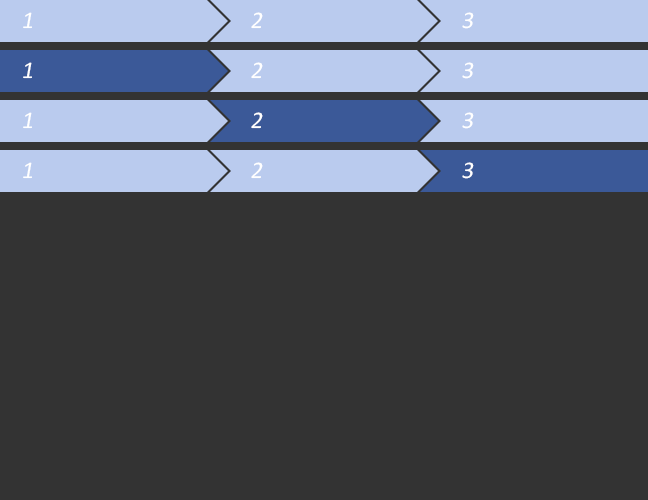
<style>
.page{position:relative;width:648px;height:500px;background:#333333}
.page>*{position:absolute;margin:0}
.t1{font:24px "Calibri";color:#ffffff;font-style:italic}
</style>
<div class="page">
<p class="t1" style="left:23px;top:12px;width:9px;height:17px">1</p>
<p class="t1" style="left:251px;top:12px;width:12px;height:17px">2</p>
<p class="t1" style="left:462px;top:12px;width:12px;height:17px">3</p>
<p class="t1" style="left:23px;top:62px;width:9px;height:17px">1</p>
<p class="t1" style="left:251px;top:62px;width:12px;height:17px">2</p>
<p class="t1" style="left:462px;top:62px;width:12px;height:17px">3</p>
<p class="t1" style="left:23px;top:112px;width:9px;height:17px">1</p>
<p class="t1" style="left:251px;top:112px;width:12px;height:17px">2</p>
<p class="t1" style="left:462px;top:112px;width:12px;height:17px">3</p>
<p class="t1" style="left:23px;top:162px;width:9px;height:17px">1</p>
<p class="t1" style="left:251px;top:162px;width:12px;height:17px">2</p>
<p class="t1" style="left:462px;top:162px;width:12px;height:17px">3</p>
</div>
